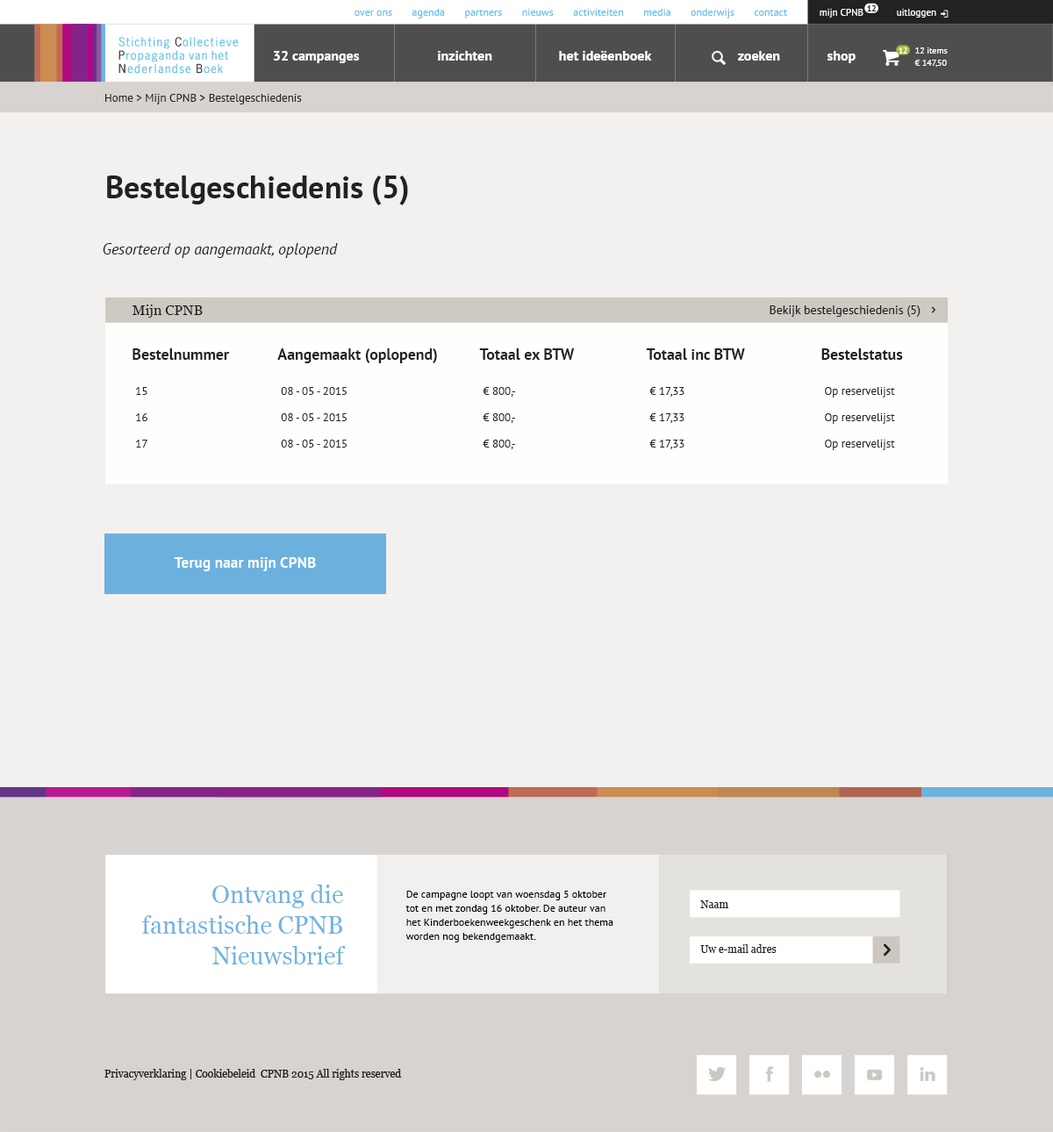
<style>
.page{position:relative;width:1053px;height:1132px;background:#f2f1ef}
.page>*{position:absolute;margin:0}
.t1{font:8.8px "PTSans-Bold";letter-spacing:-0.05em;color:#222221}
.t2{font:10.5px "PTSans-Regular";color:#65bdec}
.t3{font:9.7px "PTSans-Regular";color:#ffffff}
.t4{font:14px "PTSans-Bold";color:#ffffff}
.t5{font:8.8px "PTSans-Bold";letter-spacing:-0.05em;color:#ffffff}
.t6{font:8.8px/12.3px "PTSans-Regular";color:#ffffff}
.t7{font:11.4px "PTSans-Regular";color:#222221}
.t8{font:31.6px "PTSans-Bold";color:#222222}
.t9{font:15.6px "PTSans-Italic";color:#222221}
.t10{font:14px "Georgia";color:#222221}
.t11{font:12.3px "PTSans-Regular";color:#222221}
.t12{font:15.6px "PTSans-Bold";color:#222221}
.t13{font:15.3px "PTSans-Bold";color:#ffffff}
.t14{font:24.6px/30.7px "Georgia";color:#5daadc}
.t15{font:10.5px/14px "PTSans-Regular";color:#000000}
.t16{font:10.5px "Georgia";color:#222221}
</style>
<div class="page">
<p class="t1" style="left:867px;top:5px;width:9px;height:6px">12</p>
<p class="t2" style="left:355px;top:9px;width:433px;height:9px">over ons       agenda       partners       nieuws       activiteiten       media       onderwijs       contact</p>
<p class="t3" style="left:820px;top:9px;width:44px;height:9px">mijn CPNB</p>
<p class="t3" style="left:897px;top:9px;width:39px;height:9px">uitloggen</p>
<p class="t4" style="left:274px;top:51px;width:86px;height:12px">32 campanges</p>
<p class="t4" style="left:438px;top:51px;width:54px;height:10px">inzichten</p>
<p class="t4" style="left:559px;top:51px;width:93px;height:10px">het ideëenboek</p>
<p class="t4" style="left:738px;top:51px;width:42px;height:10px">zoeken</p>
<p class="t4" style="left:827px;top:51px;width:29px;height:12px">shop</p>
<p class="t5" style="left:899px;top:47px;width:9px;height:7px">12</p>
<p class="t6" style="left:915px;top:47px;width:33px;height:20px">12 items<br>€ 147,50</p>
<p class="t7" style="left:105px;top:94px;width:197px;height:10px">Home &gt; Mijn CPNB &gt; Bestelgeschiedenis</p>
<p class="t8" style="left:107px;top:176px;width:301px;height:29px">Bestelgeschiedenis (5)</p>
<p class="t9" style="left:103px;top:243px;width:235px;height:15px">Gesorteerd op aangemaakt, oplopend</p>
<p class="t10" style="left:133px;top:305px;width:70px;height:13px">Mijn CPNB</p>
<p class="t11" style="left:770px;top:305px;width:151px;height:12px">Bekijk bestelgeschiedenis (5)</p>
<p class="t12" style="left:133px;top:348px;width:96px;height:12px">Bestelnummer</p>
<p class="t12" style="left:277px;top:348px;width:160px;height:15px">Aangemaakt (oplopend)</p>
<p class="t12" style="left:479px;top:348px;width:96px;height:12px">Totaal ex BTW</p>
<p class="t12" style="left:646px;top:348px;width:99px;height:12px">Totaal inc BTW</p>
<p class="t12" style="left:821px;top:348px;width:82px;height:12px">Bestelstatus</p>
<p class="t7" style="left:136px;top:387px;width:11px;height:8px">15</p>
<p class="t7" style="left:281px;top:387px;width:66px;height:8px">08 - 05 - 2015</p>
<p class="t7" style="left:483px;top:387px;width:32px;height:10px">€ 800,-</p>
<p class="t7" style="left:649px;top:387px;width:36px;height:10px">€ 17,33</p>
<p class="t7" style="left:825px;top:387px;width:70px;height:11px">Op reservelijst</p>
<p class="t7" style="left:136px;top:413px;width:11px;height:8px">16</p>
<p class="t7" style="left:281px;top:413px;width:66px;height:8px">08 - 05 - 2015</p>
<p class="t7" style="left:483px;top:413px;width:32px;height:10px">€ 800,-</p>
<p class="t7" style="left:649px;top:413px;width:36px;height:10px">€ 17,33</p>
<p class="t7" style="left:825px;top:413px;width:70px;height:11px">Op reservelijst</p>
<p class="t7" style="left:136px;top:440px;width:11px;height:8px">17</p>
<p class="t7" style="left:281px;top:440px;width:66px;height:8px">08 - 05 - 2015</p>
<p class="t7" style="left:483px;top:440px;width:32px;height:9px">€ 800,-</p>
<p class="t7" style="left:649px;top:440px;width:36px;height:9px">€ 17,33</p>
<p class="t7" style="left:825px;top:440px;width:70px;height:10px">Op reservelijst</p>
<p class="t13" style="left:174px;top:557px;width:142px;height:14px">Terug naar mijn CPNB</p>
<p class="t14" style="left:141px;top:885px;width:205px;height:80px;text-align:right;opacity:0.9">Ontvang die<br>fantastische CPNB<br>Nieuwsbrief</p>
<p class="t15" style="left:405px;top:891px;width:208px;height:52px">De campagne loopt van woensdag 5 oktober tot en met zondag 16 oktober. De auteur van het Kinderboekenweekgeschenk en het thema worden nog bekendgemaakt.</p>
<p class="t16" style="left:700px;top:900px;width:28px;height:8px">Naam</p>
<p class="t16" style="left:700px;top:944px;width:77px;height:9px">Uw e-mail adres</p>
<p class="t16" style="left:104px;top:1069px;width:298px;height:11px">Privacyverklaring | Cookiebeleid  CPNB 2015 All rights reserved</p>
</div>
